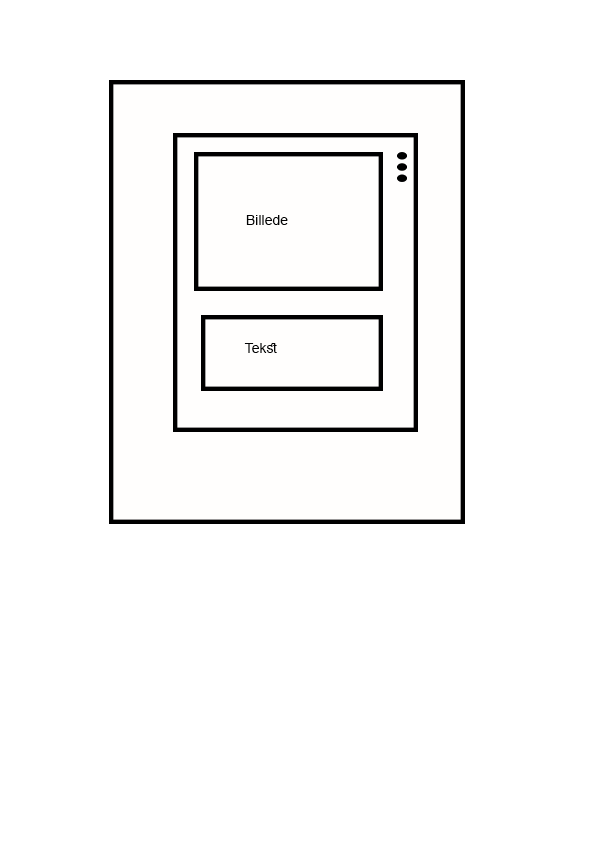
<style>
.page{position:relative;width:595px;height:842px;background:#ffffff}
.page>*{position:absolute;margin:0}
.t1{font:14px "ArialMT";color:#040404}
</style>
<div class="page">
<p class="t1" style="left:246px;top:215px;width:42px;height:10px">Billede</p>
<p class="t1" style="left:244px;top:343px;width:33px;height:10px">Tekst</p>
</div>
